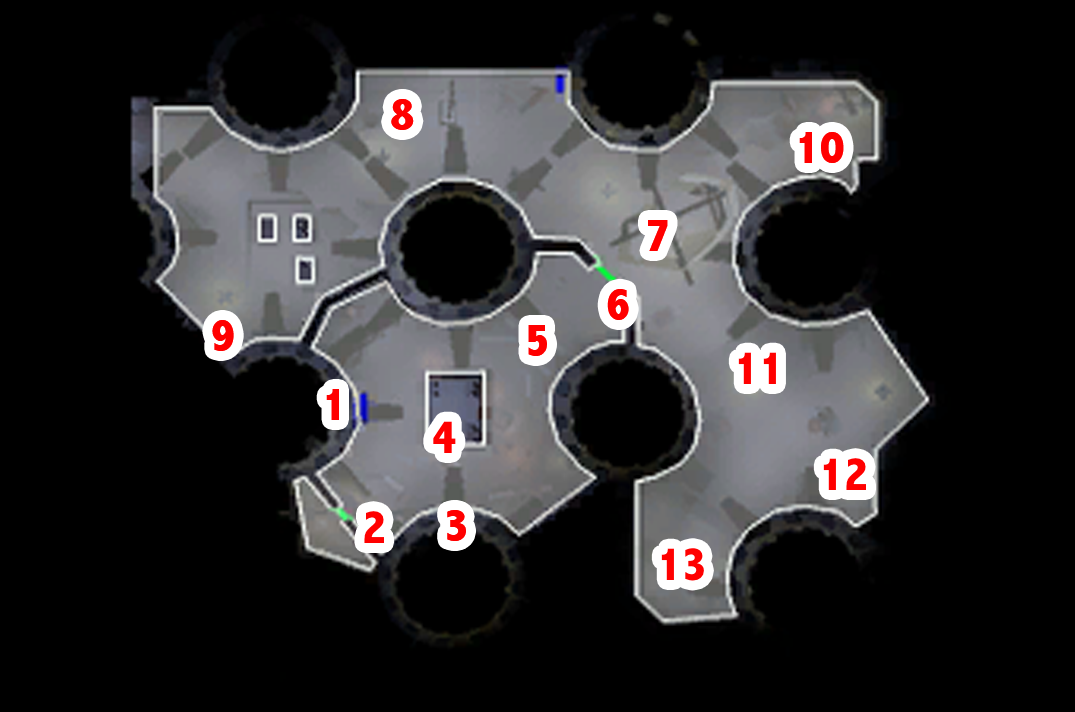
<style>
.page{position:relative;width:1075px;height:712px;background:#000000}
.page>*{position:absolute;margin:0}
.t1{font:48px "AbadiMT-CondensedExtraBold";color:#ff0000}
</style>
<div class="page">
<p class="t1" style="left:391px;top:99px;width:23px;height:31px">8</p>
<p class="t1" style="left:799px;top:132px;width:45px;height:31px">10</p>
<p class="t1" style="left:648px;top:220px;width:20px;height:31px">7</p>
<p class="t1" style="left:607px;top:289px;width:22px;height:31px">6</p>
<p class="t1" style="left:212px;top:320px;width:22px;height:31px">9</p>
<p class="t1" style="left:528px;top:325px;width:19px;height:31px">5</p>
<p class="t1" style="left:738px;top:352px;width:38px;height:32px">11</p>
<p class="t1" style="left:326px;top:389px;width:13px;height:31px">1</p>
<p class="t1" style="left:433px;top:421px;width:23px;height:32px">4</p>
<p class="t1" style="left:823px;top:458px;width:43px;height:32px">12</p>
<p class="t1" style="left:447px;top:510px;width:19px;height:31px">3</p>
<p class="t1" style="left:364px;top:511px;width:20px;height:32px">2</p>
<p class="t1" style="left:661px;top:548px;width:43px;height:33px">13</p>
</div>
